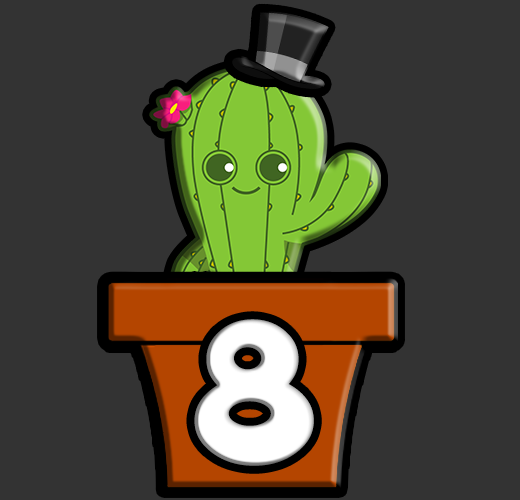
<style>
.page{position:relative;width:520px;height:500px;background:#333333}
.page>*{position:absolute;margin:0}
.t1{font:215.4px "Funhouse";color:#ffffff}
</style>
<div class="page">
<p class="t1" style="left:194px;top:319px;width:120px;height:147px">8</p>
</div>
